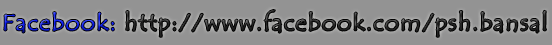
<style>
.page{position:relative;width:552px;height:45px;background:#939393}
.page>*{position:absolute;margin:0}
.t1{font:39.2px "TempusSansITC";letter-spacing:0.05em;color:#282828;scale:1.06 1}
.t2{font:39.2px "TempusSansITC";letter-spacing:0.05em;color:#0f1ff3;scale:1.06 1}
</style>
<div class="page">
<p class="t1" style="left:4px;top:10px;width:542px;height:27px"><span class="t2">Facebook:</span> http://www.facebook.com/psh.bansal</p>
</div>
